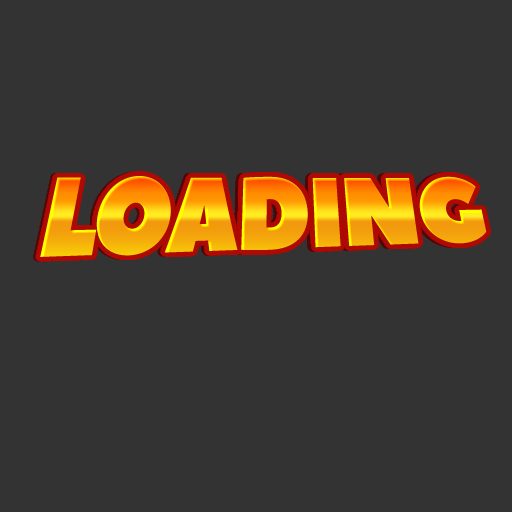
<style>
.page{position:relative;width:512px;height:512px;background:#333333}
.page>*{position:absolute;margin:0}
.t1{font:101.3px "PeaceSans";letter-spacing:-0.025em;scale:0.89 1}
.t2{font:101.7px "PeaceSans";letter-spacing:-0.025em;scale:0.89 1}
</style>
<div class="page">
<p class="t1" style="left:38px;top:176px;width:445px;height:81px">LOADING</p>
<p class="t2" style="left:40px;top:175px;width:447px;height:82px">LOADING</p>
</div>
